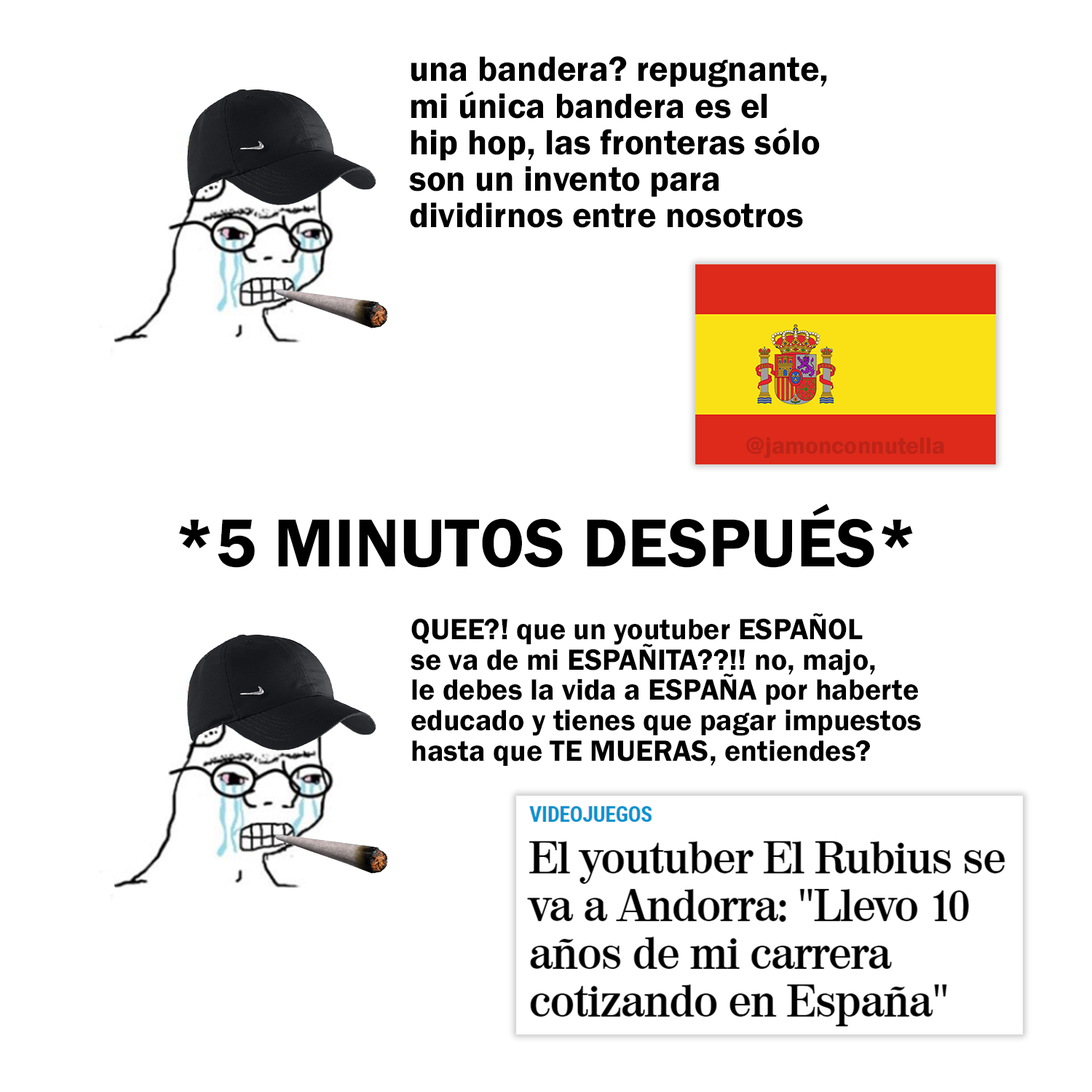
<style>
.page{position:relative;width:1092px;height:1092px;background:#ffffff}
.page>*{position:absolute;margin:0}
.t1{font:36.4px "FranklinGothic-Demi";color:#000000}
.t2{font:24px "FranklinGothic-Demi";color:#bc2417}
.t3{font:70.1px "FranklinGothic-Demi";color:#000000}
.t4{font:30.4px "FranklinGothic-Demi";color:#000000}
</style>
<div class="page">
<p class="t1" style="left:409px;top:56px;width:418px;height:172px">una bandera? repugnante,<br>mi única bandera es el<br>hip hop, las fronteras sólo<br>son un invento para<br>dividirnos entre nosotros</p>
<p class="t2" style="left:746px;top:437px;width:198px;height:21px">@jamonconnutella</p>
<p class="t3" style="left:179px;top:504px;width:734px;height:64px">*5 MINUTOS DESPUÉS*</p>
<p class="t4" style="left:411px;top:613px;width:510px;height:153px">QUEE?! que un youtuber ESPAÑOL<br>se va de mi ESPAÑITA??!! no, majo,<br>le debes la vida a ESPAÑA por haberte<br>educado y tienes que pagar impuestos<br>hasta que TE MUERAS, entiendes?</p>
</div>
